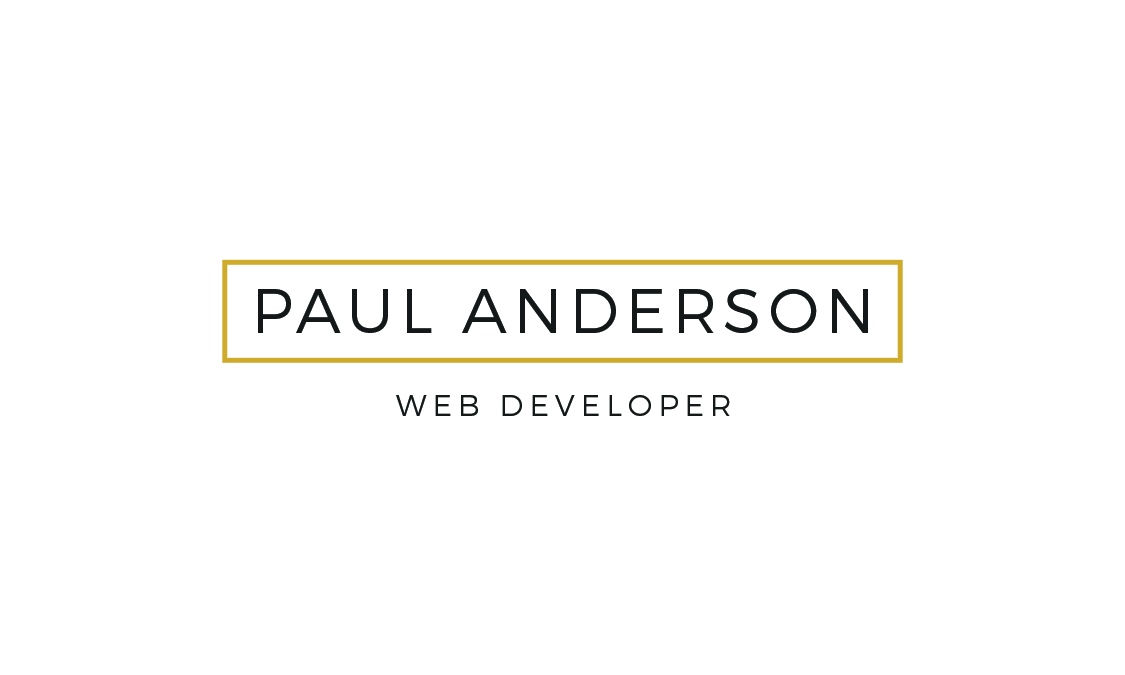
<style>
.page{position:relative;width:1125px;height:675px;background:#ffffff}
.page>*{position:absolute;margin:0}
.t1{font:62.5px "Montserrat-Light";letter-spacing:0.1em;color:#141819}
.t2{font:30px "Montserrat-Light";letter-spacing:0.2em;color:#141819}
</style>
<div class="page">
<p class="t1" style="left:258px;top:289px;width:610px;height:44px">PAUL ANDERSON</p>
<p class="t2" style="left:396px;top:395px;width:334px;height:21px">WEB DEVELOPER</p>
</div>
